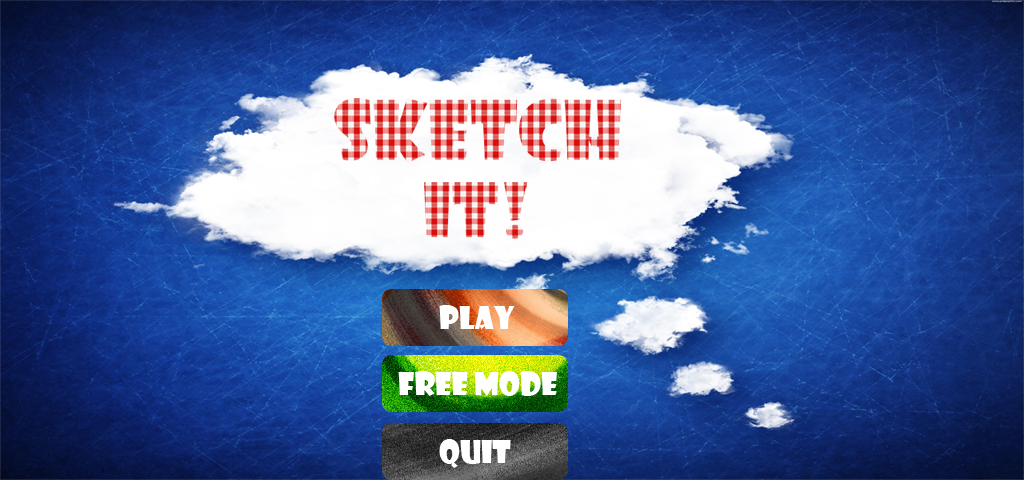
<style>
.page{position:relative;width:1024px;height:480px}
.page>*{position:absolute;margin:0}
.t1{font:30px "ShowcardGothic-Reg";color:#ffffff}
</style>
<div class="page">
<p class="t1" style="left:439px;top:305px;width:76px;height:25px">Play</p>
<p class="t1" style="left:398px;top:371px;width:159px;height:25px">Free Mode</p>
<p class="t1" style="left:439px;top:439px;width:72px;height:29px">Quit</p>
</div>
